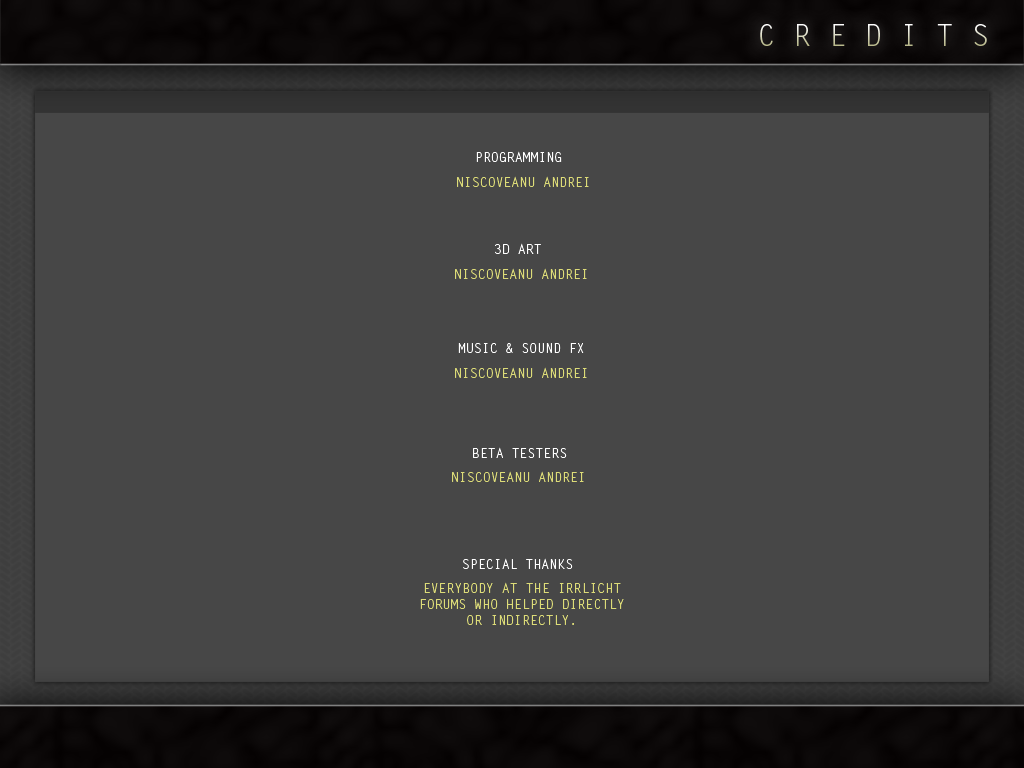
<style>
.page{position:relative;width:1024px;height:768px;background:#474747}
.page>*{position:absolute;margin:0}
.t1{font:29.7px "LetterGothicStd"}
.t2{font:13.2px "LetterGothicStd";color:#ffffff}
.t3{font:13.2px "LetterGothicStd";color:#dddc78}
</style>
<div class="page">
<p class="t1" style="left:760px;top:24px;width:227px;height:22px">C R E D I T S</p>
<p class="t2" style="left:476px;top:151px;width:86px;height:11px">PROGRAMMING</p>
<p class="t3" style="left:457px;top:176px;width:132px;height:11px">NISCOVEANU ANDREI</p>
<p class="t2" style="left:495px;top:243px;width:46px;height:11px">3D ART</p>
<p class="t3" style="left:455px;top:268px;width:132px;height:11px">NISCOVEANU ANDREI</p>
<p class="t2" style="left:458px;top:343px;width:126px;height:10px">MUSIC &amp; SOUND FX</p>
<p class="t3" style="left:455px;top:367px;width:132px;height:11px">NISCOVEANU ANDREI</p>
<p class="t2" style="left:473px;top:447px;width:94px;height:11px">BETA TESTERS</p>
<p class="t3" style="left:452px;top:471px;width:132px;height:11px">NISCOVEANU ANDREI</p>
<p class="t2" style="left:463px;top:558px;width:110px;height:11px">SPECIAL THANKS</p>
<p class="t3" style="left:420px;top:582px;width:204px;height:43px;text-align:center">EVERYBODY AT THE IRRLICHT<br>FORUMS WHO HELPED DIRECTLY<br>OR INDIRECTLY.</p>
</div>
